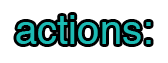
<style>
.page{position:relative;width:168px;height:63px;background:#ffffff}
.page>*{position:absolute;margin:0}
.t1{font:40px "Helvetica";color:#1cbbb4}
</style>
<div class="page">
<p class="t1" style="left:16px;top:15px;width:135px;height:29px">actions:</p>
</div>
